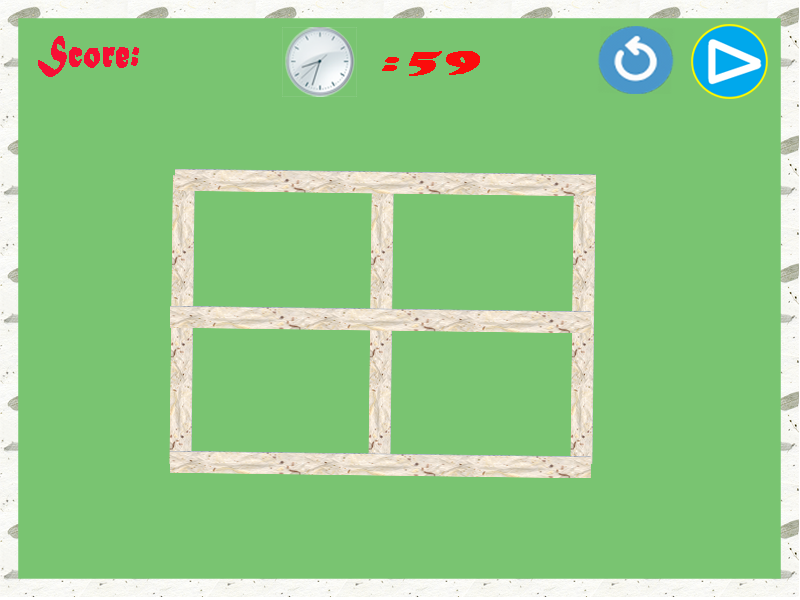
<style>
.page{position:relative;width:800px;height:600px;background:#79c471}
.page>*{position:absolute;margin:0}
.t1{font:46.4px "MaturaMTScriptCapitals";color:#f70e34;font-weight:bold;scale:0.72 1}
.t2{font:32.8px "MaturaMTScriptCapitals";color:#fb0c0c;font-weight:bold;scale:2.12 1}
</style>
<div class="page">
<p class="t1" style="left:38px;top:36px;width:101px;height:41px">Score:</p>
<p class="t2" style="left:382px;top:51px;width:98px;height:25px">:59</p>
</div>
